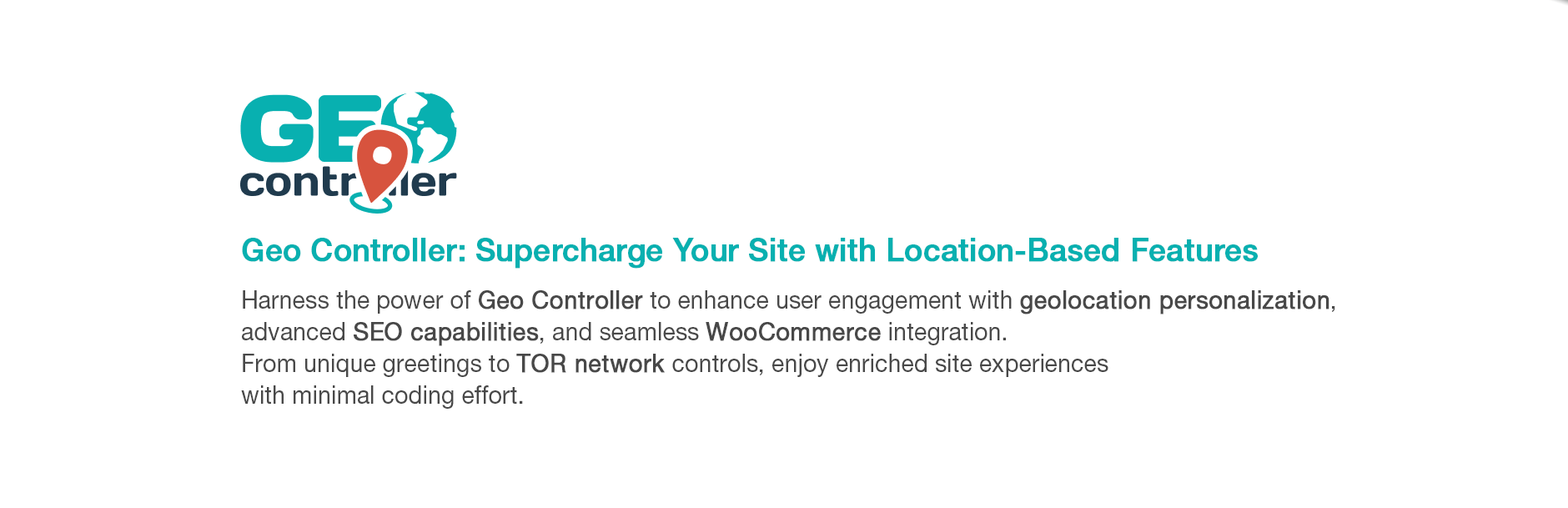
<style>
.page{position:relative;width:1568px;height:508px;background:#ffffff}
.page>*{position:absolute;margin:0}
.t1{font:31.7px "HelveticaNeueLTPro-Md";color:#08b0b0;font-weight:bold;scale:0.96 1}
.t2{font:25px/31.7px "HelveticaNeueLTPro-Roman";color:#484848;scale:0.96 1}
.t3{font:25px/31.7px "HelveticaNeueLTPro-Roman";color:#484848;font-weight:bold;scale:0.96 1}
</style>
<div class="page">
<p class="t1" style="left:242px;top:238px;width:1016px;height:31px">Geo Controller: Supercharge Your Site with Location-Based Features</p>
<p class="t2" style="left:241px;top:290px;width:1094px;height:119px">Harness the power of <span class="t3">Geo Controller</span> to enhance user engagement with <span class="t3">geolocation personalization</span>,<br>advanced <span class="t3">SEO capabilities</span>, and seamless <span class="t3">WooCommerce</span> integration.<br>From unique greetings to <span class="t3">TOR network </span>controls, enjoy enriched site experiences <br>with minimal coding effort.</p>
</div>
